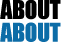
<style>
.page{position:relative;width:61px;height:42px;background:#000000}
.page>*{position:absolute;margin:0}
.t1{font:24px/11.4px "Impact";letter-spacing:-0.025em;color:#000000}
.t2{font:24px/11.4px "Impact";letter-spacing:-0.025em;color:#0c6ca7}
</style>
<div class="page">
<p class="t1" style="left:0px;top:0px;width:61px;height:42px;text-align:center">ABOUT<br><br><span class="t2">ABOUT</span></p>
</div>
